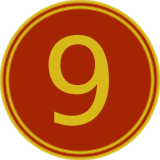
<style>
.page{position:relative;width:160px;height:160px;background:#a52503}
.page>*{position:absolute;margin:0}
.t1{font:120px "DejaVuSans";color:#d6b918}
</style>
<div class="page">
<p class="t1" style="left:48px;top:34px;width:61px;height:92px">9</p>
</div>
